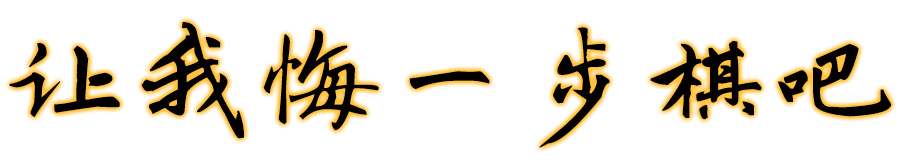
<style>
.page{position:relative;width:899px;height:165px;background:#ffffff}
.page>*{position:absolute;margin:0}
.t1{font:119.4px "SentyZHAO";color:#020000}
</style>
<div class="page">
<p class="t1" style="left:9px;top:22px;width:883px;height:126px">让我悔一步棋吧</p>
</div>
